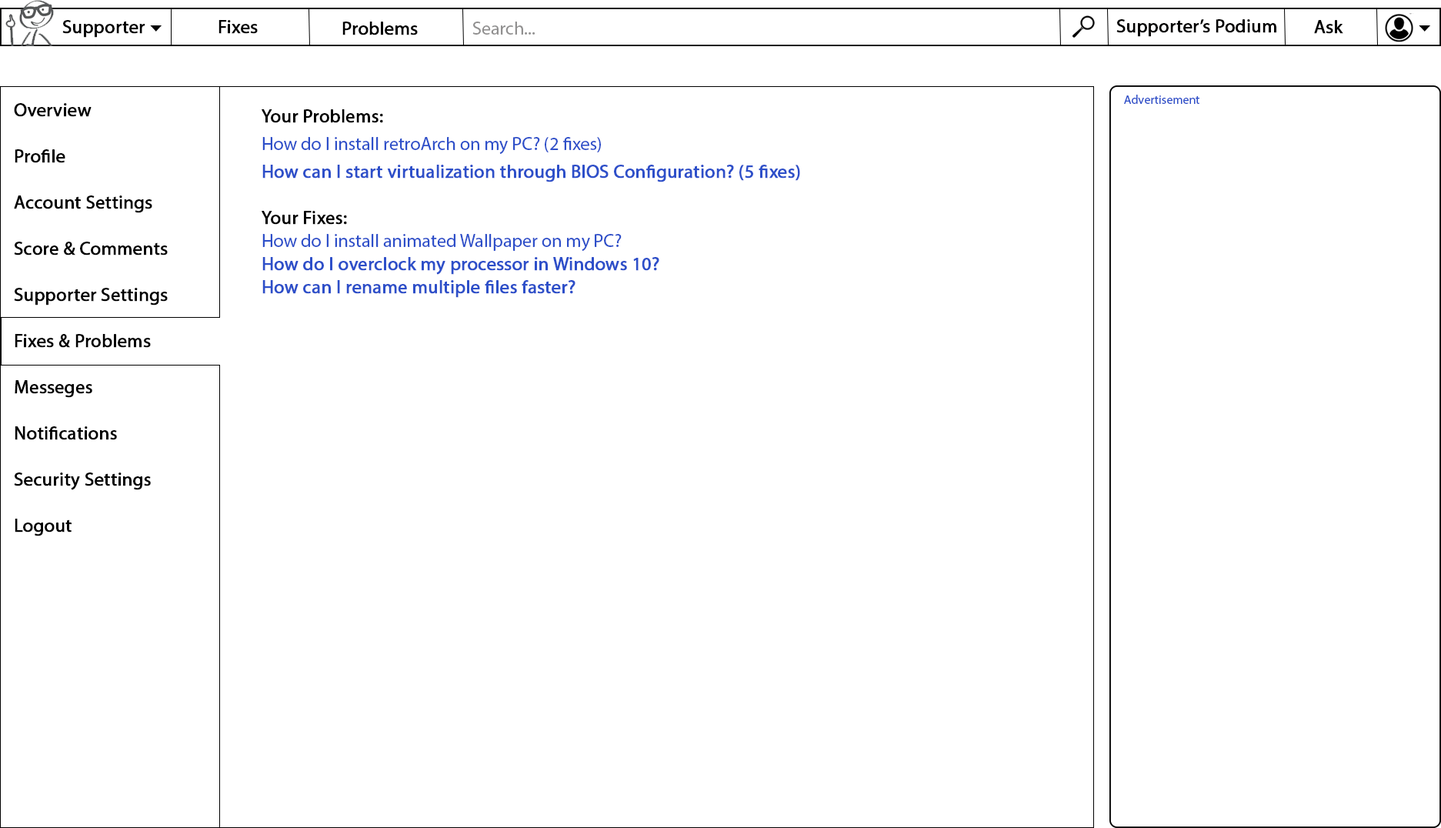
<style>
.page{position:relative;width:1441px;height:828px;background:#ffffff}
.page>*{position:absolute;margin:0}
.t1{font:18.5px "MyriadPro-Regular";color:#000000;font-weight:bold}
.t2{font:18.5px "MyriadPro-Regular";color:#919090}
.t3{font:18.5px "MyriadPro-Regular";color:#010000;font-weight:bold}
.t4{font:12.3px "MyriadPro-Regular";color:#2d4fc9}
.t5{font:18.5px/46.2px "MyriadPro-Regular";color:#000000;font-weight:bold}
.t6{font:18.5px/23.1px "MyriadPro-Regular";color:#2d4fc9;font-weight:bold}
.t7{font:18.5px/27.7px "MyriadPro-Regular";color:#2d4fc9}
.t8{font:18.5px/27.7px "MyriadPro-Regular";color:#2d4fc9;font-weight:bold}
.t9{font:18.5px/23.1px "MyriadPro-Regular";color:#2d4fc9}
</style>
<div class="page">
<p class="t1" style="left:62px;top:20px;width:83px;height:18px">Supporter</p>
<p class="t1" style="left:218px;top:20px;width:40px;height:14px">Fixes</p>
<p class="t1" style="left:342px;top:22px;width:76px;height:13px">Problems</p>
<p class="t2" style="left:472px;top:22px;width:63px;height:13px">Search...</p>
<p class="t3" style="left:1116px;top:19px;width:160px;height:18px">Supporter’s Podium</p>
<p class="t1" style="left:1314px;top:20px;width:29px;height:14px">Ask</p>
<p class="t4" style="left:1124px;top:95px;width:75px;height:9px">Advertisement</p>
<p class="t5" style="left:14px;top:103px;width:154px;height:433px">Overview<br>Profile<br>Account Settings<br>Score &amp; Comments<br>Supporter Settings<br>Fixes &amp; Problems<br>Messeges<br>Notifications<br>Security Settings<br>Logout</p>
<p class="t6" style="left:262px;top:109px;width:538px;height:189px"><span class="t5">Your Problems:<br></span><span class="t7">How do I install retroArch on my PC? (2 fixes)<br></span><span class="t8">How can I start virtualization through BIOS Configuration? (5 fixes)<br></span><span class="t5">Your Fixes:<br></span><span class="t9">How do I install animated Wallpaper on my PC?<br></span>How do I overclock my processor in Windows 10?<br>How can I rename multiple files faster?</p>
</div>
